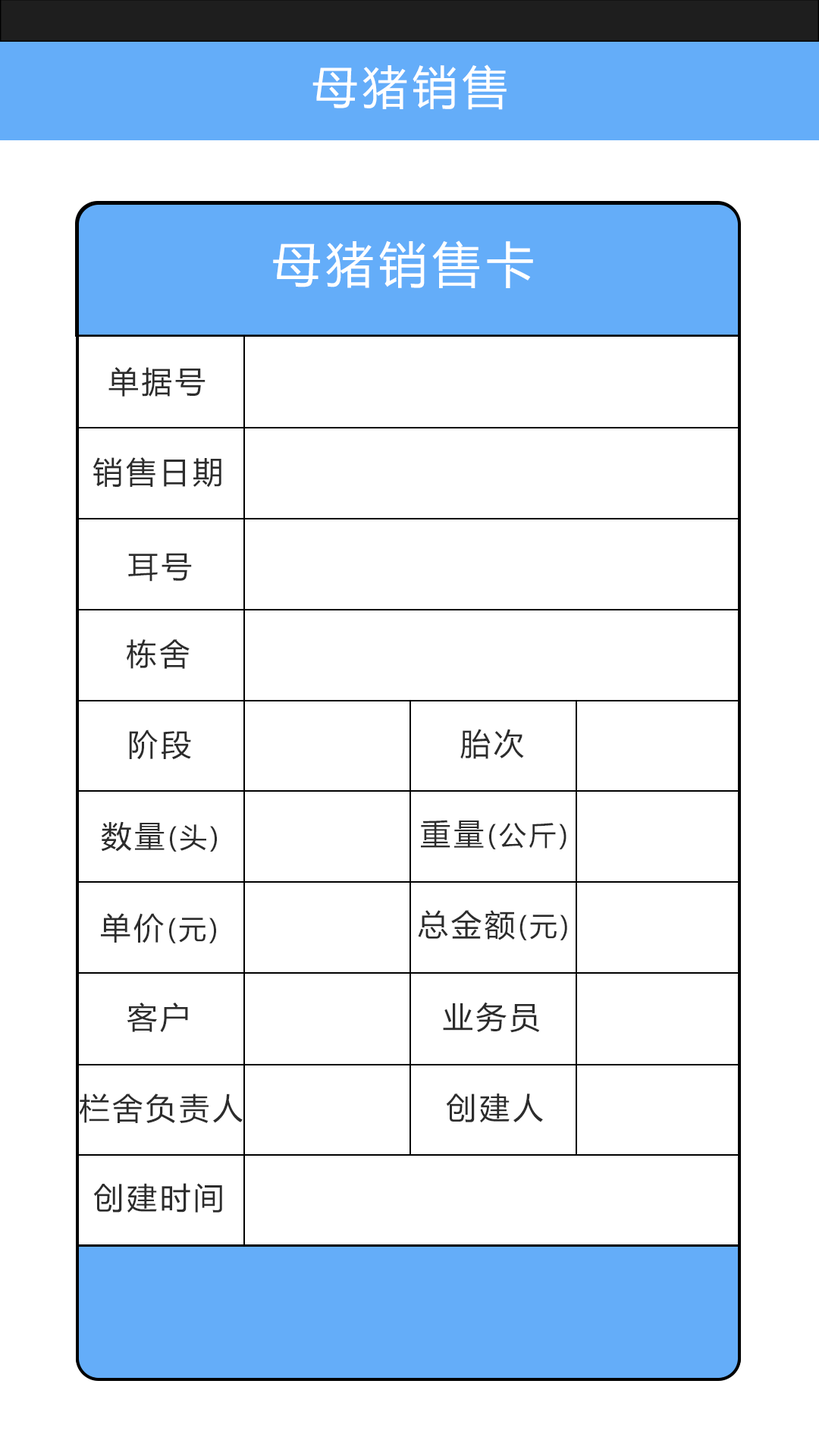
<style>
.page{position:relative;width:819px;height:1456px;background:#ffffff}
.page>*{position:absolute;margin:0}
.t1{font:45.5px "MicrosoftYaHei";letter-spacing:0.1em;color:#ffffff}
.t2{font:48.5px "MicrosoftYaHei";letter-spacing:0.1em;color:#ffffff}
.t3{font:30.3px "MicrosoftYaHei";letter-spacing:0.1em;color:#2c2c2c}
.t4{font:27.3px "MicrosoftYaHei";letter-spacing:0.1em;color:#2c2c2c}
</style>
<div class="page">
<p class="t1" style="left:312px;top:64px;width:195px;height:46px">母猪销售</p>
<p class="t2" style="left:273px;top:240px;width:260px;height:48px">母猪销售卡</p>
<p class="t3" style="left:108px;top:367px;width:98px;height:30px">单据号</p>
<p class="t3" style="left:93px;top:457px;width:128px;height:31px">销售日期</p>
<p class="t3" style="left:128px;top:553px;width:64px;height:29px">耳号</p>
<p class="t3" style="left:127px;top:639px;width:63px;height:30px">栋舍</p>
<p class="t3" style="left:129px;top:730px;width:62px;height:30px">阶段</p>
<p class="t3" style="left:460px;top:729px;width:64px;height:30px">胎次</p>
<p class="t4" style="left:101px;top:821px;width:116px;height:31px"><span class="t3">数量</span>(头)</p>
<p class="t4" style="left:421px;top:820px;width:145px;height:29px"><span class="t3">重量</span>(公斤)</p>
<p class="t4" style="left:101px;top:913px;width:115px;height:30px"><span class="t3">单价</span>(元)</p>
<p class="t3" style="left:418px;top:910px;width:149px;height:30px">总金额<span class="t4">(元)</span></p>
<p class="t3" style="left:443px;top:1002px;width:97px;height:31px">业务员</p>
<p class="t3" style="left:127px;top:1003px;width:61px;height:29px">客户</p>
<p class="t3" style="left:79px;top:1094px;width:164px;height:29px">栏舍负责人</p>
<p class="t3" style="left:446px;top:1094px;width:97px;height:29px">创建人</p>
<p class="t3" style="left:93px;top:1183px;width:129px;height:30px">创建时间</p>
</div>
